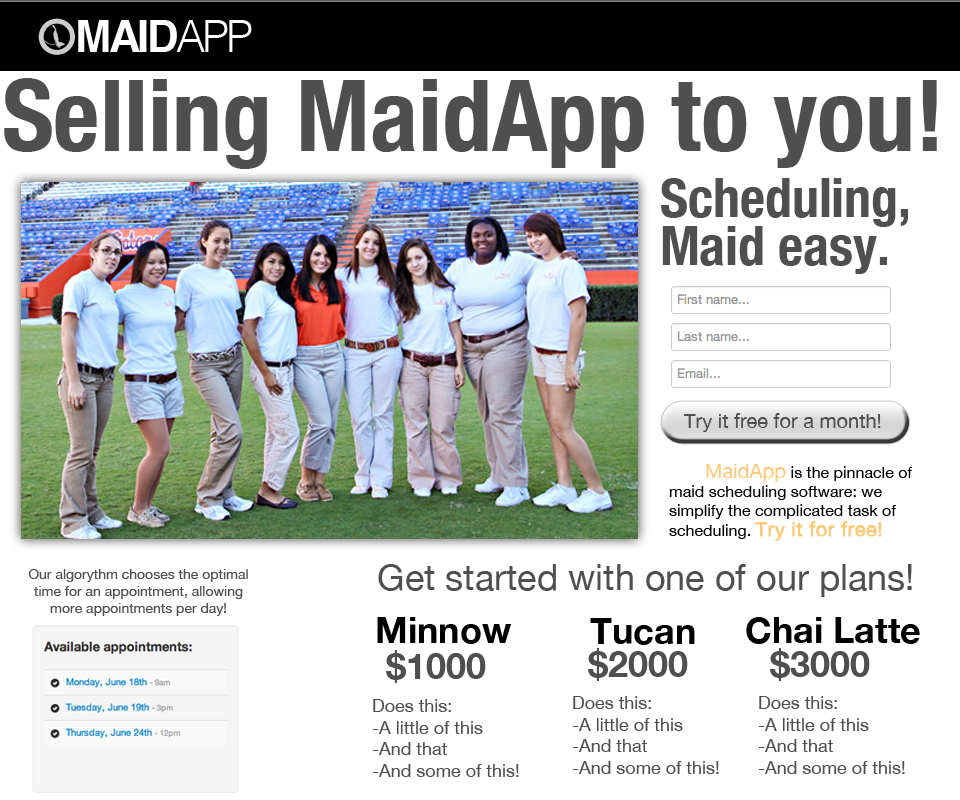
<style>
.page{position:relative;width:960px;height:800px;background:#ffffff}
.page>*{position:absolute;margin:0}
.t1{font:100px "HelveticaNeue-CondensedBold";color:#4f4f4f}
.t2{font:54px/48px "HelveticaNeue-CondensedBold";color:#4f4f4f}
.t3{font:20px "HelveticaNeue";color:#4f4f4f}
.t4{font:16px "HelveticaNeue";color:#000000}
.t5{font:20px "HelveticaNeue";color:#ffc879}
.t6{font:20px "HelveticaNeue";color:#ffc879;font-weight:bold}
.t7{font:14px "HelveticaNeue";color:#4f4f4f}
.t8{font:36px "HelveticaNeue";color:#4f4f4f}
.t9{font:36px "HelveticaNeue-Bold";color:#000000}
.t10{font:36px "HelveticaNeue-Bold";color:#4f4f4f}
.t11{font:18px "HelveticaNeue";color:#4f4f4f}
</style>
<div class="page">
<p class="t1" style="left:4px;top:78px;width:933px;height:91px">Selling MaidApp to you!</p>
<p class="t2" style="left:661px;top:178px;width:247px;height:96px">Scheduling, Maid easy.</p>
<p class="t3" style="left:683px;top:413px;width:198px;height:19px">Try it free for a month!</p>
<p class="t4" style="left:669px;top:464px;width:244px;height:75px"><span class="t5"> MaidApp</span> is the pinnacle of maid scheduling software: we simplify the complicated task of scheduling.</p>
<p class="t6" style="left:755px;top:521px;width:127px;height:20px">Try it for free!</p>
<p class="t7" style="left:28px;top:569px;width:220px;height:47px;text-align:center">Our algorythm chooses the optimal time for an appointment, allowing more appointments per day!</p>
<p class="t8" style="left:378px;top:564px;width:534px;height:33px">Get started with one of our plans!</p>
<p class="t9" style="left:377px;top:617px;width:135px;height:27px">Minnow</p>
<p class="t9" style="left:746px;top:617px;width:174px;height:27px">Chai Latte</p>
<p class="t9" style="left:590px;top:618px;width:105px;height:27px">Tucan</p>
<p class="t10" style="left:386px;top:650px;width:100px;height:33px">$1000</p>
<p class="t10" style="left:588px;top:648px;width:100px;height:33px">$2000</p>
<p class="t10" style="left:770px;top:648px;width:100px;height:33px">$3000</p>
<p class="t11" style="left:372px;top:699px;width:147px;height:78px">Does this:<br>-A little of this<br>-And that<br>-And some of this!</p>
<p class="t11" style="left:572px;top:696px;width:147px;height:78px">Does this:<br>-A little of this<br>-And that<br>-And some of this!</p>
<p class="t11" style="left:758px;top:696px;width:147px;height:78px">Does this:<br>-A little of this<br>-And that<br>-And some of this!</p>
</div>
